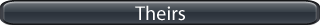
<style>
.page{position:relative;width:320px;height:25px}
.page>*{position:absolute;margin:0}
.t1{font:20px "MyriadPro-Regular";letter-spacing:0.005em;color:#ffffff}
</style>
<div class="page">
<p class="t1" style="left:135px;top:5px;width:50px;height:16px">Theirs</p>
</div>
